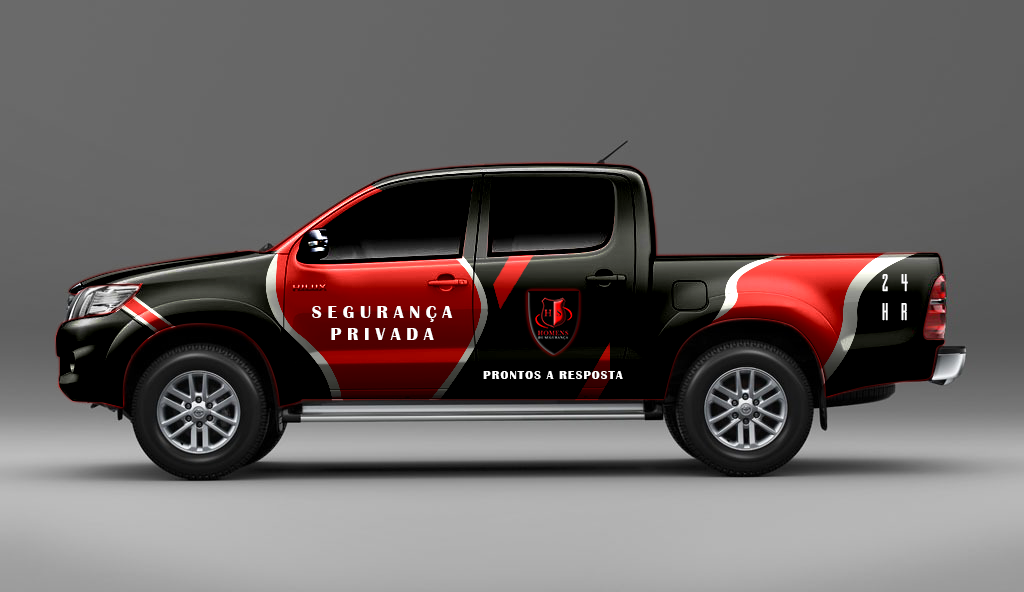
<style>
.page{position:relative;width:1024px;height:592px}
.page>*{position:absolute;margin:0}
.t1{font:24px "CastIron-Condensed";letter-spacing:0.52em;color:#ffffff}
.t2{font:18px "BritannicBold";letter-spacing:0.32em;color:#ffffff}
.t3{font:12px "BritannicBold";letter-spacing:0.1em;color:#ffffff}
</style>
<div class="page">
<p class="t1" style="left:882px;top:274px;width:26px;height:47px">24<br>HR</p>
<p class="t2" style="left:312px;top:306px;width:141px;height:34px;text-align:center">SEGURANÇA<br>PRIVADA</p>
<p class="t3" style="left:483px;top:371px;width:140px;height:8px">PRONTOS A RESPOSTA</p>
</div>
